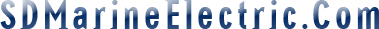
<style>
.page{position:relative;width:379px;height:29px;background:#ffffff}
.page>*{position:absolute;margin:0}
.t1{font:42px "NewGlobalBold";letter-spacing:0.1em}
</style>
<div class="page">
<p class="t1" style="left:0px;top:0px;width:379px;height:29px">SDMarineElectric.Com</p>
</div>
